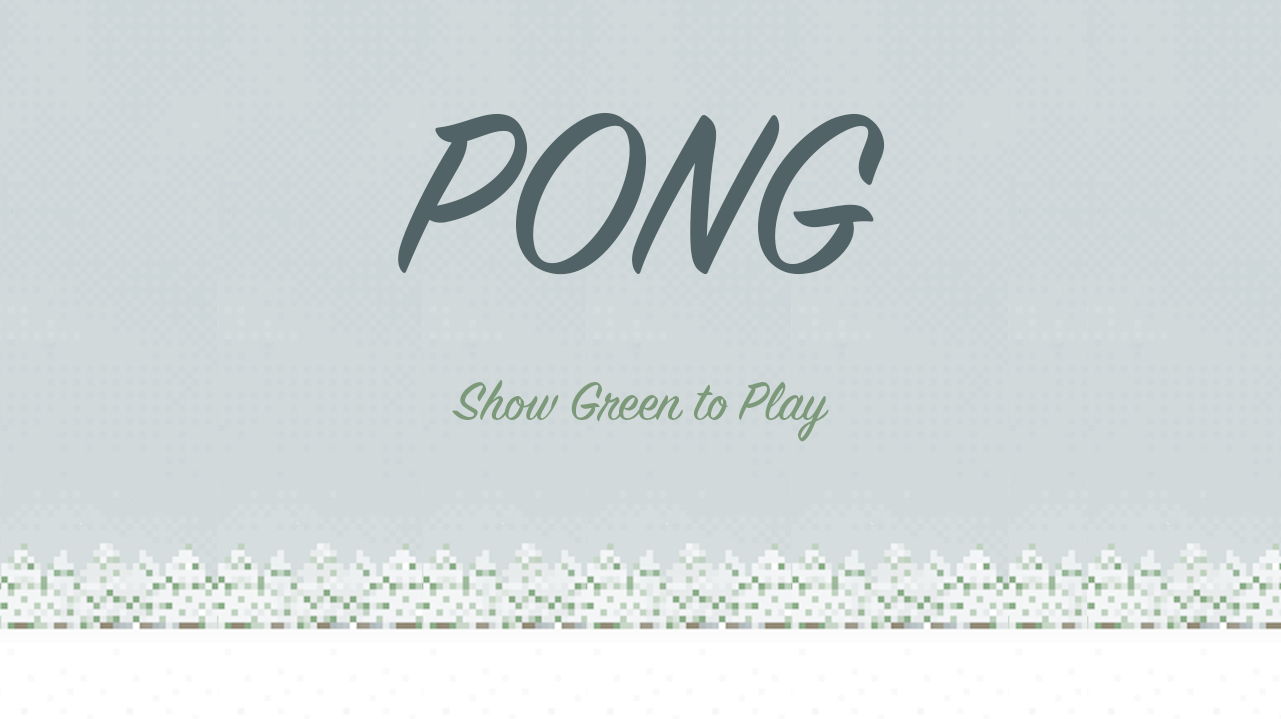
<style>
.page{position:relative;width:1281px;height:719px;background:#d1d9db}
.page>*{position:absolute;margin:0}
.t1{font:250px "SignPainter-HouseScript";color:#516366}
.t2{font:60px "SignPainter-HouseScript";color:#7c997a}
</style>
<div class="page">
<p class="t1" style="left:398px;top:112px;width:487px;height:163px">PONG</p>
<p class="t2" style="left:452px;top:379px;width:377px;height:63px">Show Green to Play</p>
</div>
